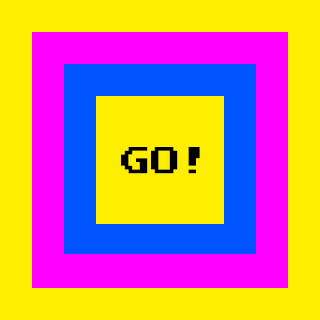
<style>
.page{position:relative;width:320px;height:320px;background:#ffee00}
.page>*{position:absolute;margin:0}
.t1{font:30px "PressStart2P";color:#000000}
</style>
<div class="page">
<p class="t1" style="left:121px;top:147px;width:79px;height:27px">GO!</p>
</div>
